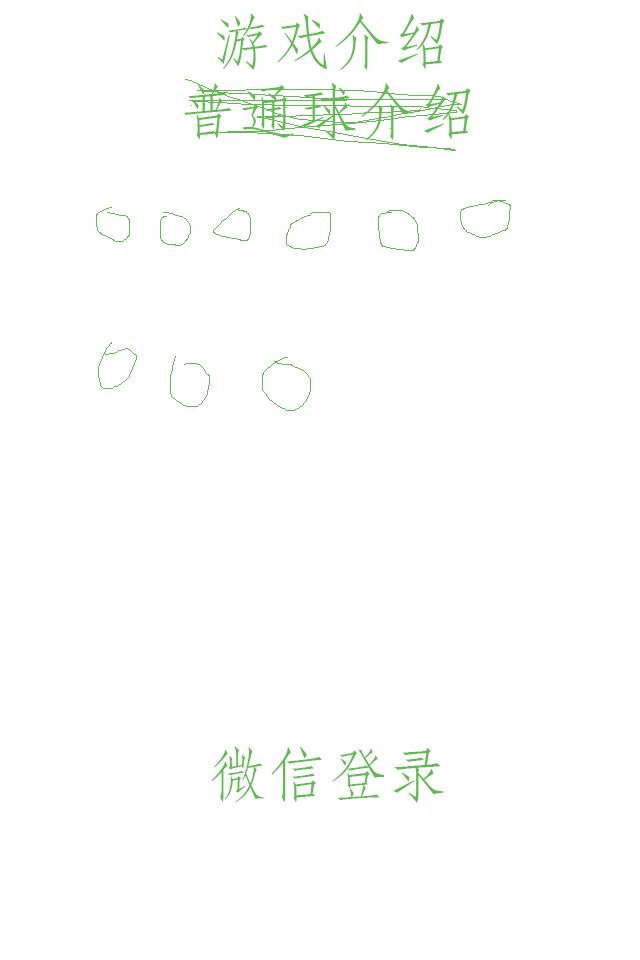
<style>
.page{position:relative;width:640px;height:960px;background:#ffffff}
.page>*{position:absolute;margin:0}
.t1{font:60px "STFangsong";color:#63b953}
</style>
<div class="page">
<p class="t1" style="left:216px;top:13px;width:229px;height:57px">游戏介绍</p>
<p class="t1" style="left:211px;top:746px;width:233px;height:57px">微信登录</p>
</div>
